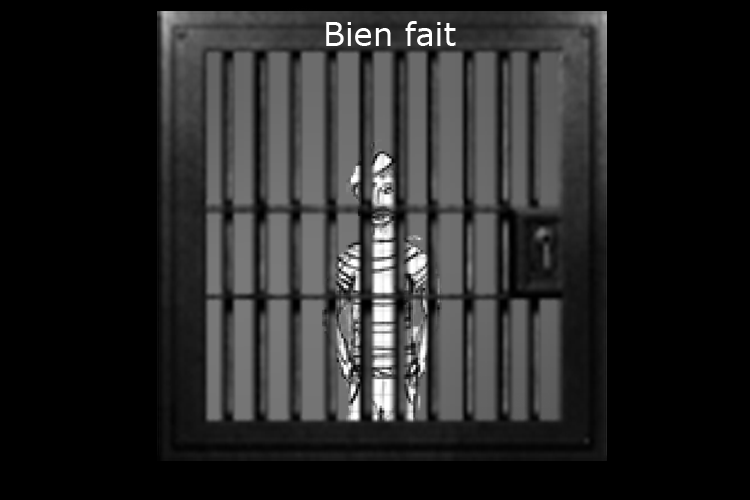
<style>
.page{position:relative;width:750px;height:500px;background:#000000}
.page>*{position:absolute;margin:0}
.t1{font:32px "Verdana";color:#ffffff}
</style>
<div class="page">
<p class="t1" style="left:326px;top:21px;width:130px;height:25px">Bien fait</p>
</div>
